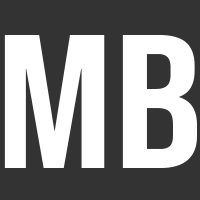
<style>
.page{position:relative;width:200px;height:200px;background:#333333}
.page>*{position:absolute;margin:0}
.t1{font:190.5px "BebasNeue-Regular";color:#ffffff;text-transform:uppercase;scale:1.14 1}
</style>
<div class="page">
<p class="t1" style="left:4px;top:35px;width:193px;height:133px">mb</p>
</div>
